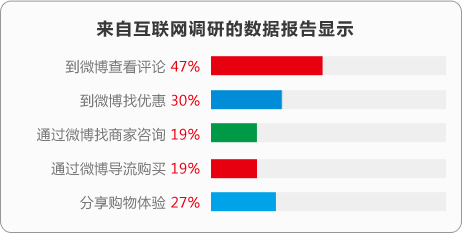
<style>
.page{position:relative;width:462px;height:233px;background:#fbfbfb}
.page>*{position:absolute;margin:0}
.t1{font:18px "FZLTCHJW--GB1-0";letter-spacing:0.025em;color:#393939}
.t2{font:14px/34px "MicrosoftYaHei";letter-spacing:0.025em;color:#787879}
.t3{font:14px/34px "MicrosoftYaHei";letter-spacing:0.025em;color:#e60010}
</style>
<div class="page">
<p class="t1" style="left:96px;top:20px;width:258px;height:17px">来自互联网调研的数据报告显示</p>
<p class="t2" style="left:37px;top:59px;width:163px;height:151px;text-align:right">到微博查看评论 <span class="t3">47%<br></span>到微博找优惠 <span class="t3">30%<br></span>通过微博找商家咨询 <span class="t3">19%<br></span>通过微博导流购买 <span class="t3">19%<br></span>分享购物体验 <span class="t3">27%</span></p>
</div>
